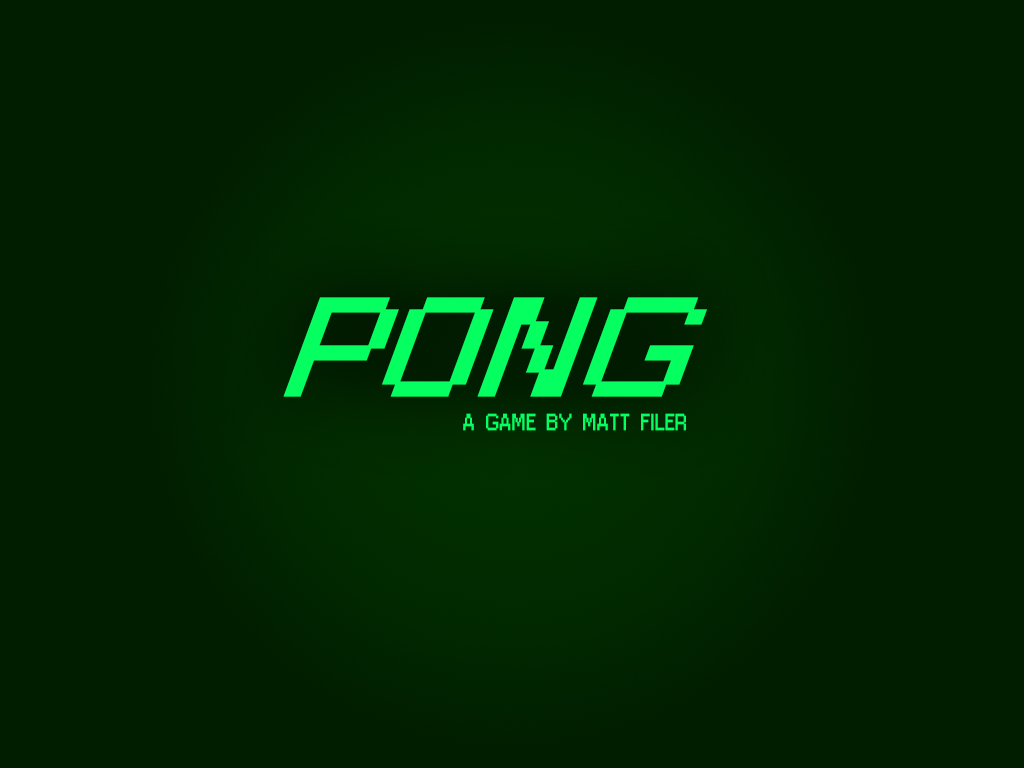
<style>
.page{position:relative;width:1024px;height:768px;background:#011e00}
.page>*{position:absolute;margin:0}
.t1{font:127.9px "Jixellation";color:#05ff61;scale:1.24 1}
.t2{font:20px "Jixellation";color:#05ff61}
</style>
<div class="page">
<p class="t1" style="left:283px;top:297px;width:424px;height:100px">PONG</p>
<p class="t2" style="left:463px;top:413px;width:223px;height:18px">a game by Matt Filer</p>
</div>
